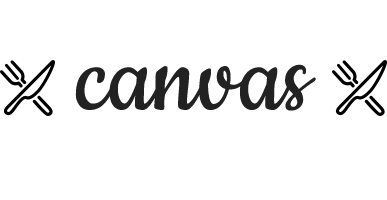
<style>
.page{position:relative;width:387px;height:200px;background:#ffffff}
.page>*{position:absolute;margin:0}
.t1{font:118px "Cookie-Regular";color:#222222}
</style>
<div class="page">
<p class="t1" style="left:75px;top:64px;width:241px;height:47px">canvas</p>
</div>
